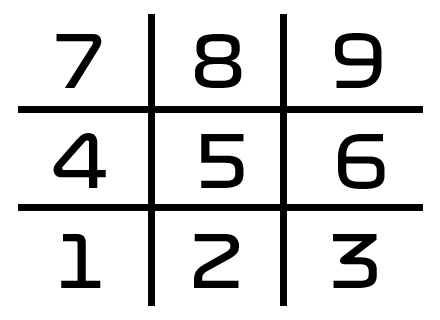
<style>
.page{position:relative;width:440px;height:320px;background:#ffffff}
.page>*{position:absolute;margin:0}
.t1{font:72px/100px "Formula1-Display-Regular";letter-spacing:0.475em;color:#000000}
</style>
<div class="page">
<p class="t1" style="left:53px;top:33px;width:332px;height:255px;text-align:center">7 8 9<br>4 5 6<br>1 2 3</p>
</div>
